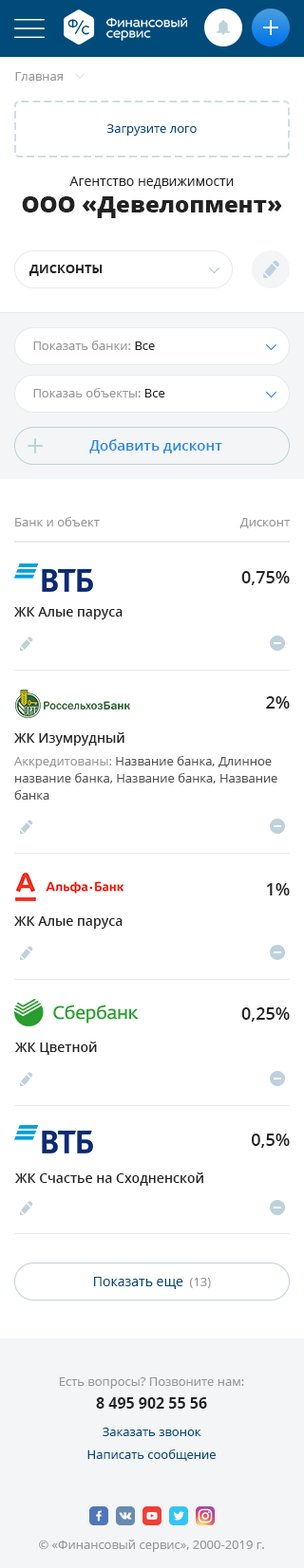
<style>
.page{position:relative;width:304px;height:1568px;background:#ffffff}
.page>*{position:absolute;margin:0}
.t1{font:12.3px "OpenSans";color:#999999}
.t2{font:12.3px "OpenSans";color:#004b7a}
.t3{font:13.3px "OpenSans";color:#222222}
.t4{font:22.8px "OpenSans-Extrabold";color:#222222}
.t5{font:12.3px "OpenSans-Bold";color:#222222;text-transform:uppercase}
.t6{font:12.3px "OpenSans";color:#222222}
.t7{font:14.2px "OpenSans-Semibold";color:#2389e5}
.t8{font:17.1px "OpenSans-Semibold";color:#222222}
.t9{font:13.3px "OpenSans-Semibold";color:#222222}
.t10{font:12.3px/17.1px "OpenSans";color:#555555}
.t11{font:13.3px/19px "OpenSans-Semibold";color:#222222}
.t12{font:12.3px/22.8px "OpenSans";color:#999999}
.t13{font:12.3px/22.8px "OpenSans";color:#555555}
.t14{font:13.3px "OpenSans";color:#004b7a}
.t15{font:15.2px/22.8px "OpenSans-Bold";color:#222222}
.t16{font:12.3px/22.8px "OpenSans";color:#004b7a}
</style>
<div class="page">
<p class="t1" style="left:15px;top:72px;width:48px;height:9px">Главная</p>
<p class="t2" style="left:106px;top:124px;width:90px;height:12px">Загрузите лого</p>
<p class="t3" style="left:69px;top:176px;width:164px;height:13px">Агентство недвижимости</p>
<p class="t4" style="left:22px;top:196px;width:260px;height:22px">ООО «Девелопмент»</p>
<p class="t5" style="left:28px;top:265px;width:74px;height:11px">дисконты</p>
<p class="t1" style="left:33px;top:341px;width:122px;height:9px">Показать банки: <span class="t6">Все</span></p>
<p class="t1" style="left:33px;top:388px;width:132px;height:9px">Показаь объекты: <span class="t6">Все</span></p>
<p class="t7" style="left:89px;top:439px;width:133px;height:14px">Добавить дисконт</p>
<p class="t1" style="left:15px;top:517px;width:85px;height:9px">Банк и объект</p>
<p class="t1" style="left:239px;top:518px;width:50px;height:10px">Дисконт</p>
<p class="t8" style="left:241px;top:571px;width:48px;height:14px">0,75%</p>
<p class="t9" style="left:14px;top:607px;width:108px;height:12px">ЖК Алые паруса</p>
<p class="t8" style="left:266px;top:696px;width:23px;height:13px">2%</p>
<p class="t10" style="left:14px;top:732px;width:263px;height:68px"><span class="t11">ЖК Изумрудный<br></span><span class="t12">Аккредитованы: </span><span class="t13">Название </span>банка, Длинное название банка, Название банка, Название банка</p>
<p class="t8" style="left:267px;top:883px;width:22px;height:12px">1%</p>
<p class="t9" style="left:14px;top:916px;width:108px;height:13px">ЖК Алые паруса</p>
<p class="t8" style="left:241px;top:1007px;width:48px;height:15px">0,25%</p>
<p class="t9" style="left:15px;top:1042px;width:82px;height:13px">ЖК Цветной</p>
<p class="t8" style="left:250px;top:1134px;width:39px;height:14px">0,5%</p>
<p class="t9" style="left:15px;top:1172px;width:188px;height:14px">ЖК Счастье на Сходненской</p>
<p class="t14" style="left:94px;top:1277px;width:117px;height:12px">Показать еще <span class="t1"> (13)</span></p>
<p class="t12" style="left:59px;top:1377px;width:185px;height:32px;text-align:center">Есть вопросы? Позвоните нам:<br><span class="t15">8 495 902 55 56</span></p>
<p class="t16" style="left:87px;top:1428px;width:128px;height:33px;text-align:center">Заказать звонок          <br>Написать сообщение</p>
<p class="t1" style="left:39px;top:1540px;width:225px;height:12px">© «Финансовый сервис», 2000-2019 г.</p>
</div>
